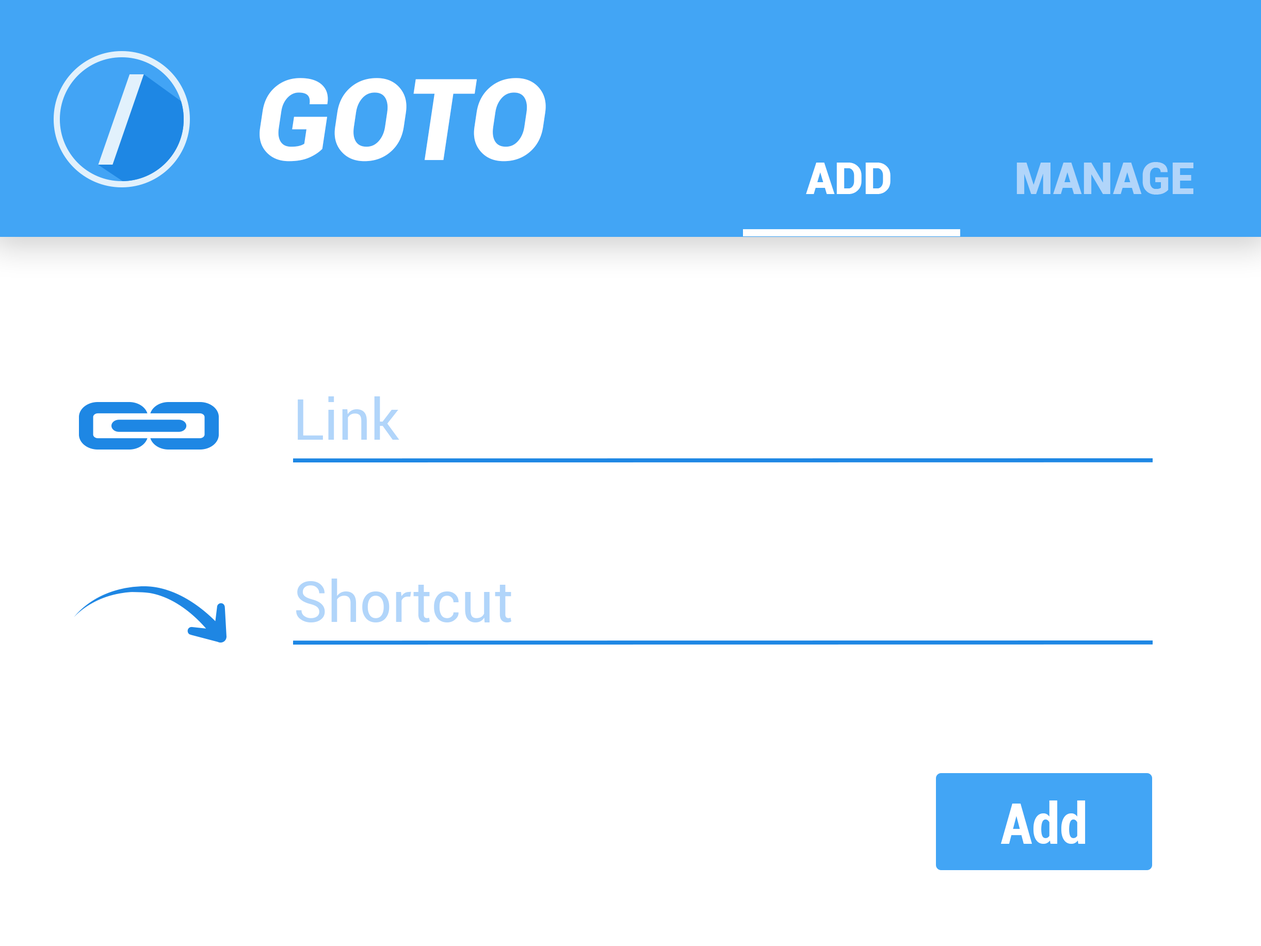
<style>
.page{position:relative;width:1261px;height:946px;background:#ffffff}
.page>*{position:absolute;margin:0}
.t1{font:113.5px "Roboto-BlackItalic";color:#ffffff}
.t2{font:44.1px "Roboto-Black";color:#b1d5fa}
.t3{font:44.1px "Roboto-Black";color:#ffffff}
.t4{font:56.8px "Roboto-Regular";color:#b1d5fa}
.t5{font:56.8px "Roboto-BoldCondensed";color:#ffffff}
</style>
<div class="page">
<p class="t1" style="left:260px;top:78px;width:286px;height:83px">GOTO</p>
<p class="t2" style="left:1016px;top:162px;width:177px;height:33px">MANAGE</p>
<p class="t3" style="left:806px;top:163px;width:84px;height:31px">ADD</p>
<p class="t4" style="left:298px;top:396px;width:101px;height:44px">Link</p>
<p class="t4" style="left:296px;top:578px;width:215px;height:44px">Shortcut</p>
<p class="t5" style="left:1000px;top:800px;width:86px;height:44px">Add</p>
</div>
